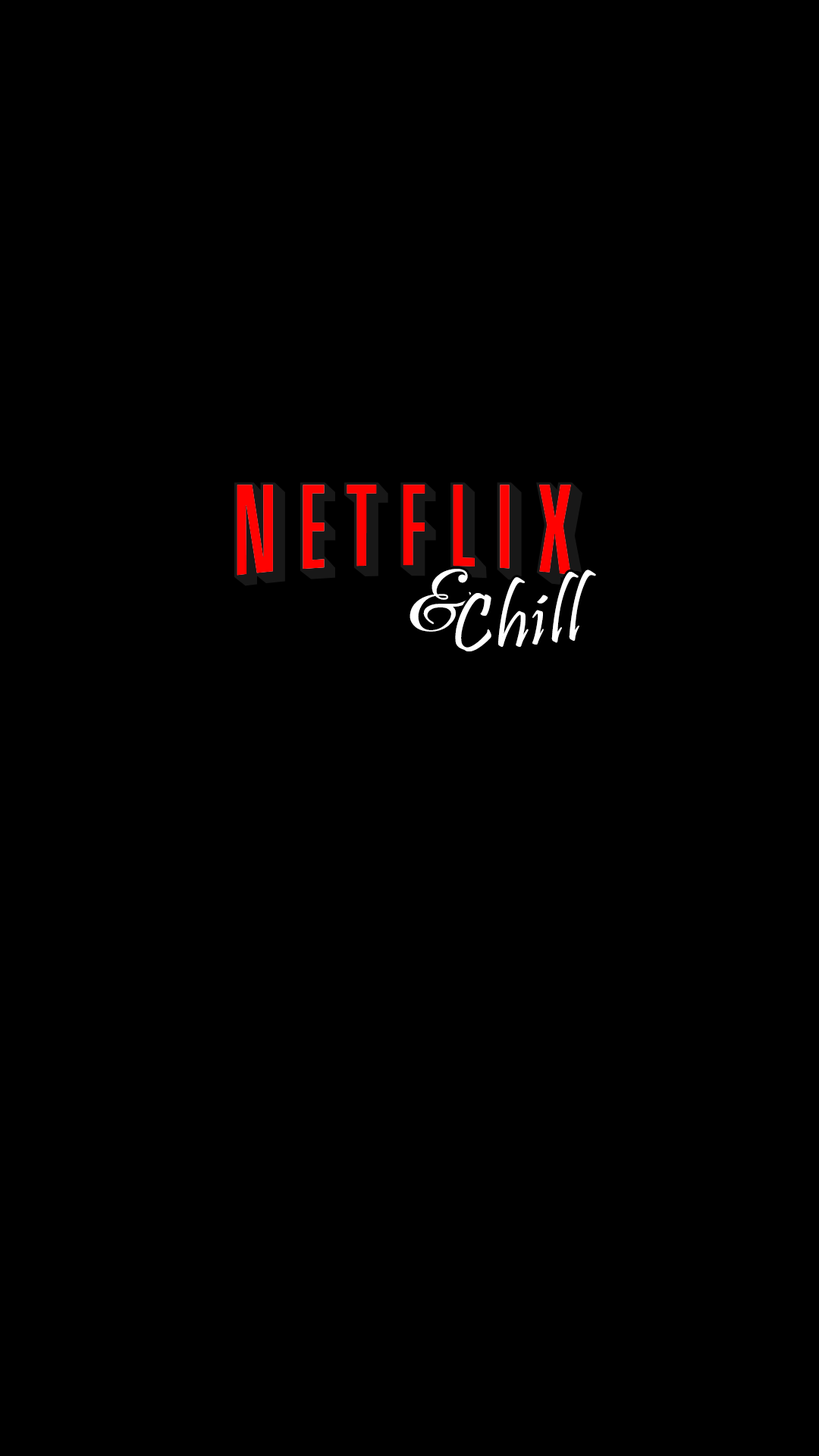
<style>
.page{position:relative;width:819px;height:1456px;background:#000000}
.page>*{position:absolute;margin:0}
.t1{font:83.4px "GreatVibes-Regular";letter-spacing:0.02em;color:#ffffff}
.t2{font:83.4px "Pristina-Regular";letter-spacing:0.02em;color:#ffffff}
</style>
<div class="page">
<p class="t1" style="left:409px;top:569px;width:63px;height:63px">&amp;</p>
<p class="t1" style="left:409px;top:569px;width:63px;height:63px">&amp;</p>
<p class="t2" style="left:455px;top:570px;width:141px;height:81px;rotate:-6deg">Chill</p>
<p class="t2" style="left:455px;top:570px;width:141px;height:81px;rotate:-6deg">Chill</p>
</div>
